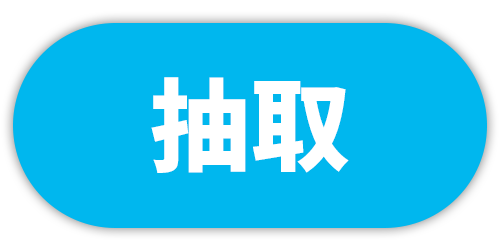
<style>
.page{position:relative;width:500px;height:250px;background:#00b7ee}
.page>*{position:absolute;margin:0}
.t1{font:100px "SourceHanSansCN-Heavy";color:#ffffff}
</style>
<div class="page">
<p class="t1" style="left:151px;top:77px;width:198px;height:96px">抽取</p>
</div>
